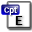
<style>
.page{position:relative;width:32px;height:32px;background:#ffffff}
.page>*{position:absolute;margin:0}
.t1{font:9px "FranklinGothic-Medium";color:#ffffff}
.t2{font:14px "FranklinGothic-Medium";color:#000000}
</style>
<div class="page">
<p class="t1" style="left:4px;top:5px;width:13px;height:11px">Cpt</p>
<p class="t2" style="left:15px;top:16px;width:8px;height:9px">E</p>
</div>
